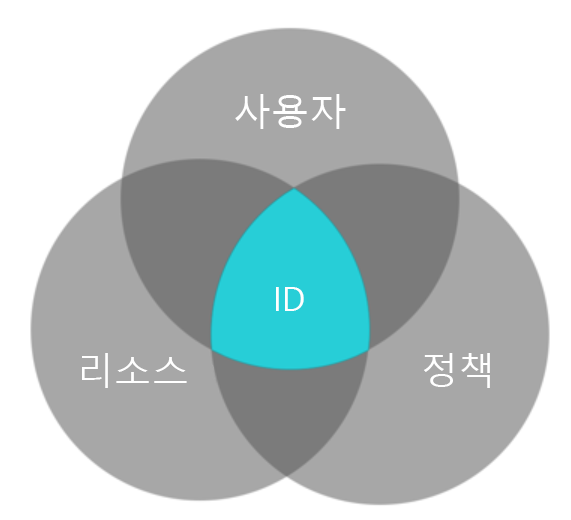
<style>
.page{position:relative;width:571px;height:520px;background:#ffffff}
.page>*{position:absolute;margin:0}
.t1{font:38px "MalgunGothic";color:#ffffff}
.t2{font:34.2px "SegoeUI";color:#ffffff;scale:0.96 1}
.t3{font:37.4px "MalgunGothic";color:#ffffff}
</style>
<div class="page">
<p class="t1" style="left:235px;top:94px;width:111px;height:35px">사용자</p>
<p class="t2" style="left:276px;top:287px;width:28px;height:24px">ID</p>
<p class="t3" style="left:82px;top:353px;width:105px;height:35px">리소스</p>
<p class="t3" style="left:424px;top:353px;width:66px;height:35px">정책</p>
</div>
